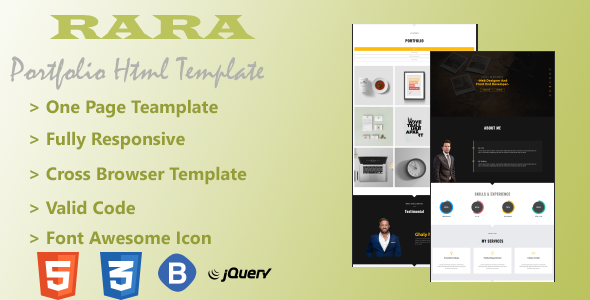
<style>
.page{position:relative;width:590px;height:300px}
.page>*{position:absolute;margin:0}
.t1{font:36px "LatinWide";color:#bbc35d}
.t2{font:33px "Mistral";color:#b1b1ae}
.t3{font:18px "NirmalaUI-Bold";color:#959e35}
</style>
<div class="page">
<p class="t1" style="left:50px;top:15px;width:206px;height:24px">RARA</p>
<p class="t2" style="left:10px;top:56px;width:255px;height:34px">Portfolio Html Template</p>
<p class="t3" style="left:30px;top:99px;width:188px;height:19px">&gt; One Page Teamplate</p>
<p class="t3" style="left:30px;top:131px;width:155px;height:19px">&gt; Fully Responsive</p>
<p class="t3" style="left:30px;top:166px;width:217px;height:19px">&gt; Cross Browser Template</p>
<p class="t3" style="left:30px;top:200px;width:105px;height:15px">&gt; Valid Code</p>
<p class="t3" style="left:30px;top:231px;width:181px;height:14px">&gt; Font Awesome Icon</p>
</div>
